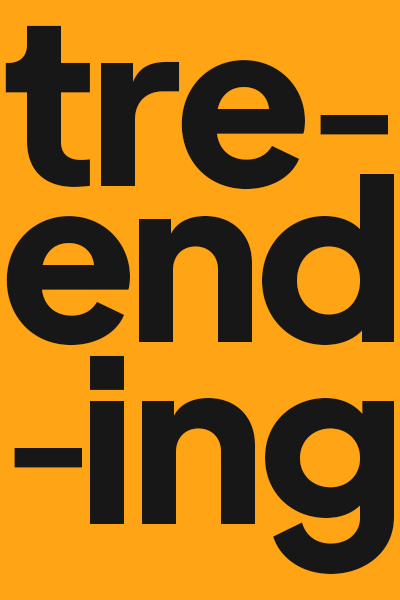
<style>
.page{position:relative;width:400px;height:600px;background:#ffa414}
.page>*{position:absolute;margin:0}
.t1{font:226px "PlusJakartaDisplay-Bold";letter-spacing:-0.02em;color:#171717}
.t2{font:150px "PlusJakartaDisplay-Bold";letter-spacing:-0.02em;color:#171717}
</style>
<div class="page">
<p class="t1" style="left:5px;top:25px;width:300px;height:165px">tre</p>
<p class="t2" style="left:320px;top:115px;width:68px;height:20px">-</p>
<p class="t1" style="left:6px;top:174px;width:388px;height:172px">end</p>
<p class="t1" style="left:90px;top:355px;width:304px;height:219px">ing</p>
<p class="t2" style="left:14px;top:448px;width:68px;height:20px">-</p>
</div>
